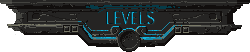
<style>
.page{position:relative;width:250px;height:52px;background:#252423}
.page>*{position:absolute;margin:0}
.t1{font:16.7px "EuphemiaCAS";scale:0.9 1}
</style>
<div class="page">
<p class="t1" style="left:106px;top:11px;width:49px;height:13px">LEVELS</p>
</div>
